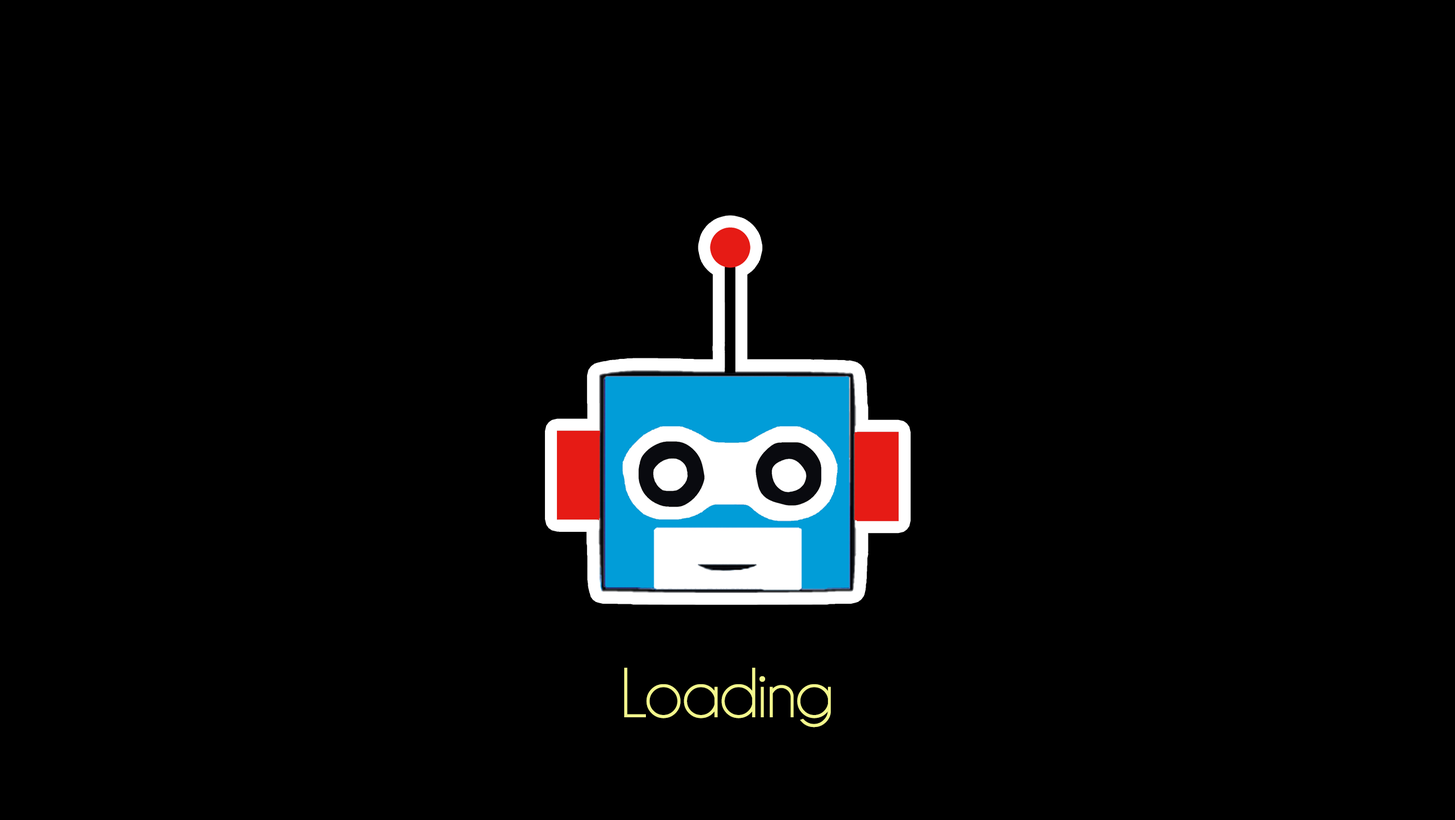
<style>
.page{position:relative;width:1455px;height:820px;background:#000000}
.page>*{position:absolute;margin:0}
.t1{font:71.3px "Champagne&Limousines";letter-spacing:-0.02em;color:#f3f78d}
</style>
<div class="page">
<p class="t1" style="left:624px;top:667px;width:207px;height:60px">Loading</p>
</div>
